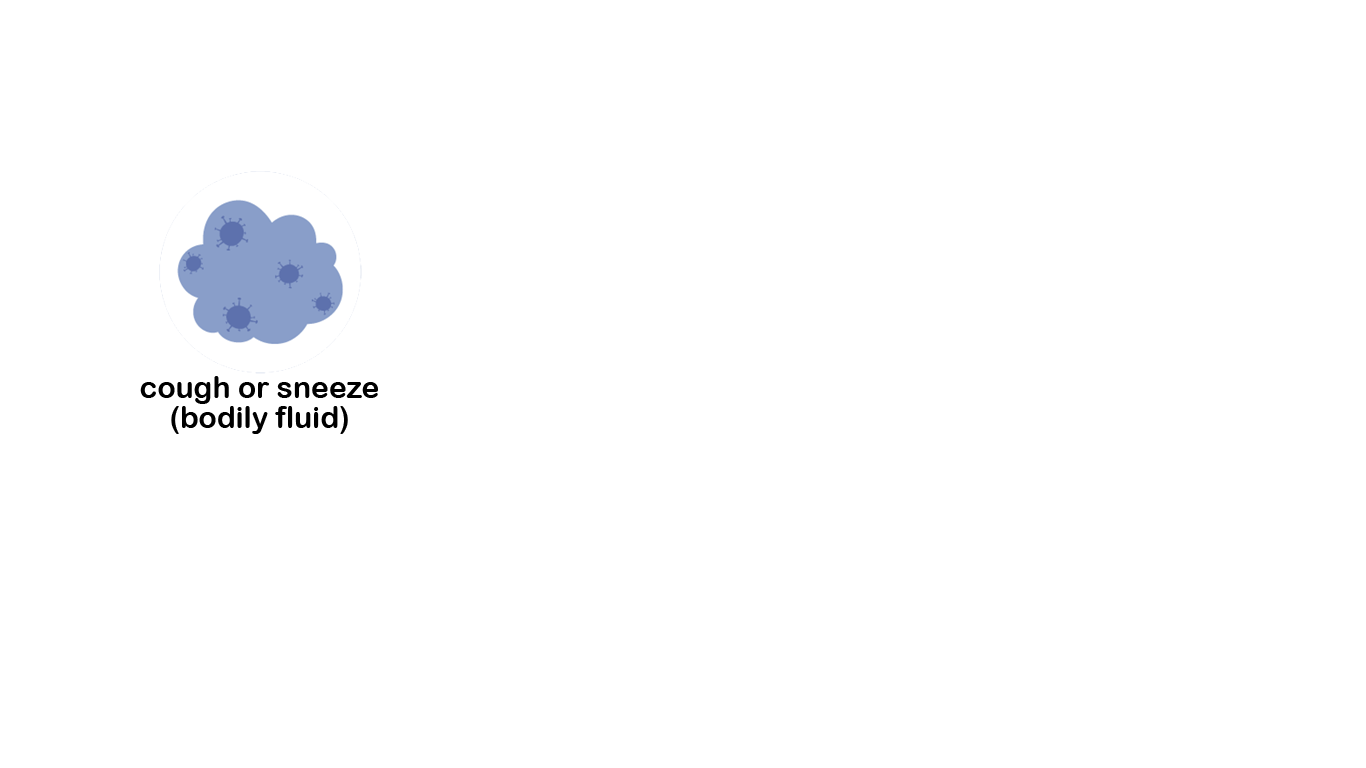
<style>
.page{position:relative;width:1366px;height:768px;background:#ffffff}
.page>*{position:absolute;margin:0}
.t1{font:30px/10px "ArialRoundedMTBold";color:#000000}
</style>
<div class="page">
<p class="t1" style="left:140px;top:376px;width:238px;height:58px;text-align:center">cough or sneeze<br><br><br>(bodily fluid)</p>
</div>
